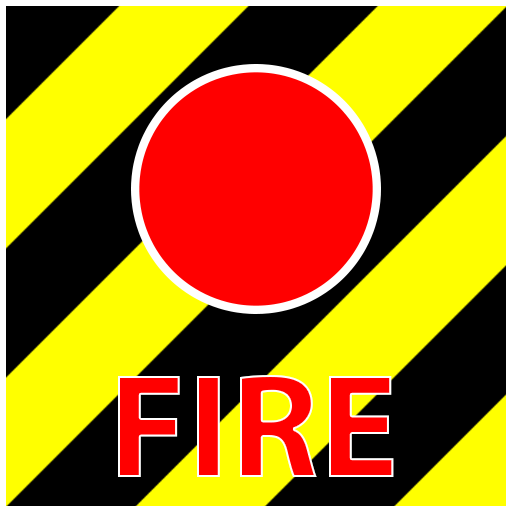
<style>
.page{position:relative;width:512px;height:512px;background:#ffff00}
.page>*{position:absolute;margin:0}
.t1{font:150px "MyriadPro-Bold";color:#ff0000}
</style>
<div class="page">
<p class="t1" style="left:118px;top:375px;width:276px;height:102px">FIRE</p>
</div>
